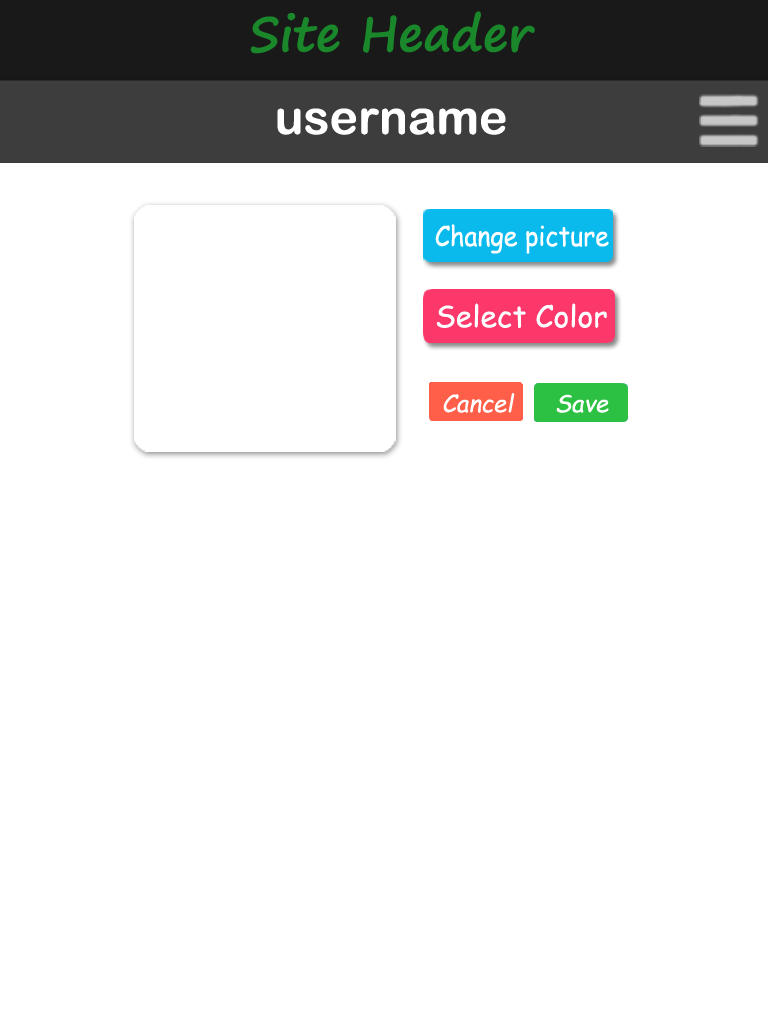
<style>
.page{position:relative;width:768px;height:1024px;background:#ffffff}
.page>*{position:absolute;margin:0}
.t1{font:48px "SegoePrint-Bold";color:#19872a}
.t2{font:48px "ArialRoundedMTBold";color:#ffffff}
.t3{font:27.6px "ComicSansMS";color:#ffffff;scale:0.91 1}
.t4{font:30px "ComicSansMS";color:#ffffff}
.t5{font:24px "ComicSansMS-Italic";color:#ffffff}
</style>
<div class="page">
<p class="t1" style="left:250px;top:11px;width:285px;height:43px">Site Header</p>
<p class="t2" style="left:277px;top:108px;width:229px;height:27px">username</p>
<p class="t3" style="left:435px;top:224px;width:174px;height:30px">Change picture</p>
<p class="t4" style="left:436px;top:303px;width:171px;height:25px">Select Color</p>
<p class="t5" style="left:443px;top:393px;width:72px;height:20px">Cancel</p>
<p class="t5" style="left:556px;top:394px;width:53px;height:19px">Save</p>
</div>
